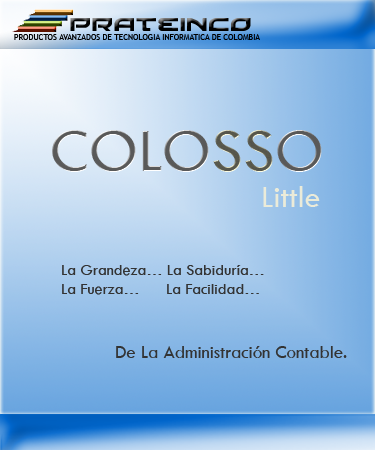
<style>
.page{position:relative;width:375px;height:450px}
.page>*{position:absolute;margin:0}
.t1{font:64px "TwCenMT-Regular";color:#ffffff}
.t2{font:64px "TwCenMT-Regular";color:#ececd9}
.t3{font:32px "TwCenMT-Regular";color:#ececd9}
.t4{font:16px "TwCenMT-Regular";color:#333333}
.t5{font:18.7px "TwCenMT-Regular";color:#333333}
</style>
<div class="page">
<p class="t1" style="left:52px;top:130px;width:270px;height:42px">COLO<span class="t2">SS</span>O</p>
<p class="t3" style="left:263px;top:186px;width:57px;height:21px">Little</p>
<p class="t4" style="left:62px;top:265px;width:202px;height:30px">La Grandeza… La Sabiduría… <br>La Fuerza…      La Facilidad…</p>
<p class="t5" style="left:116px;top:346px;width:231px;height:12px">De La Administración Contable.</p>
</div>
